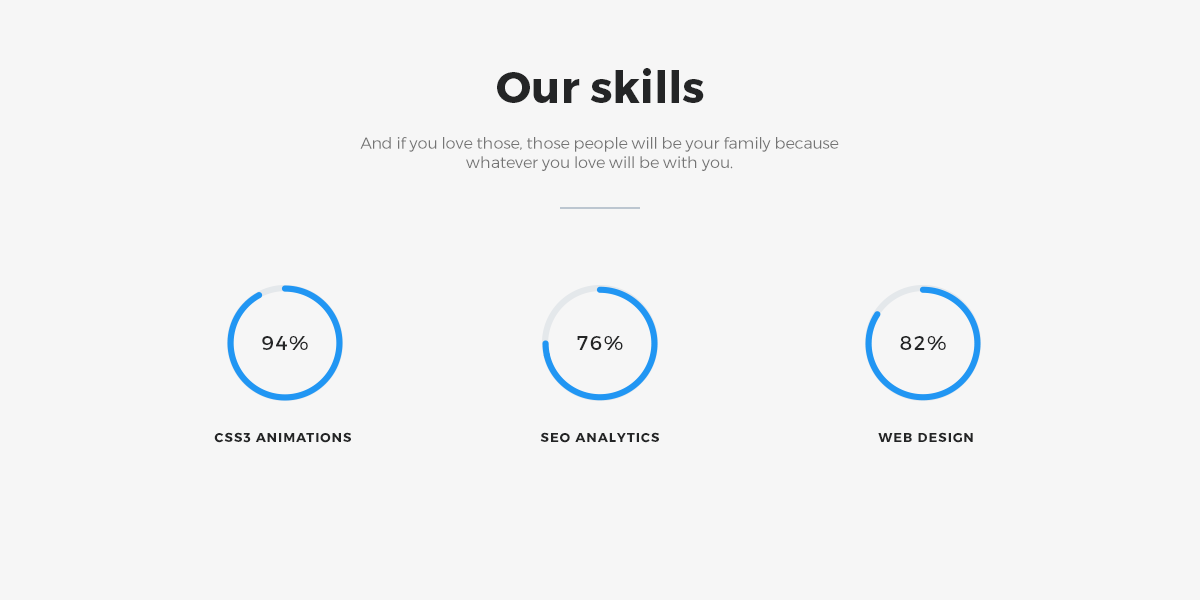
<style>
.page{position:relative;width:1200px;height:600px;background:#f6f6f6}
.page>*{position:absolute;margin:0}
.t1{font:44px "Montserrat-Bold";color:#242526}
.t2{font:16px "Montserrat-Light";color:#747474}
.t3{font:20px "Montserrat-Regular";letter-spacing:0.08em;color:#242526}
.t4{font:13px "Montserrat-Bold";letter-spacing:0.08em;color:#242526;text-transform:uppercase}
</style>
<div class="page">
<p class="t1" style="left:497px;top:68px;width:207px;height:35px">Our skills</p>
<p class="t2" style="left:360px;top:137px;width:479px;height:34px;text-align:center">And if you love those, those people will be your family because whatever you love will be with you.</p>
<p class="t3" style="left:262px;top:336px;width:46px;height:14px">94%</p>
<p class="t3" style="left:577px;top:336px;width:46px;height:14px">76%</p>
<p class="t3" style="left:900px;top:336px;width:46px;height:14px">82%</p>
<p class="t4" style="left:214px;top:432px;width:137px;height:11px">css3 animations</p>
<p class="t4" style="left:540px;top:432px;width:119px;height:11px">seo analytics</p>
<p class="t4" style="left:878px;top:432px;width:95px;height:11px">web design</p>
</div>
